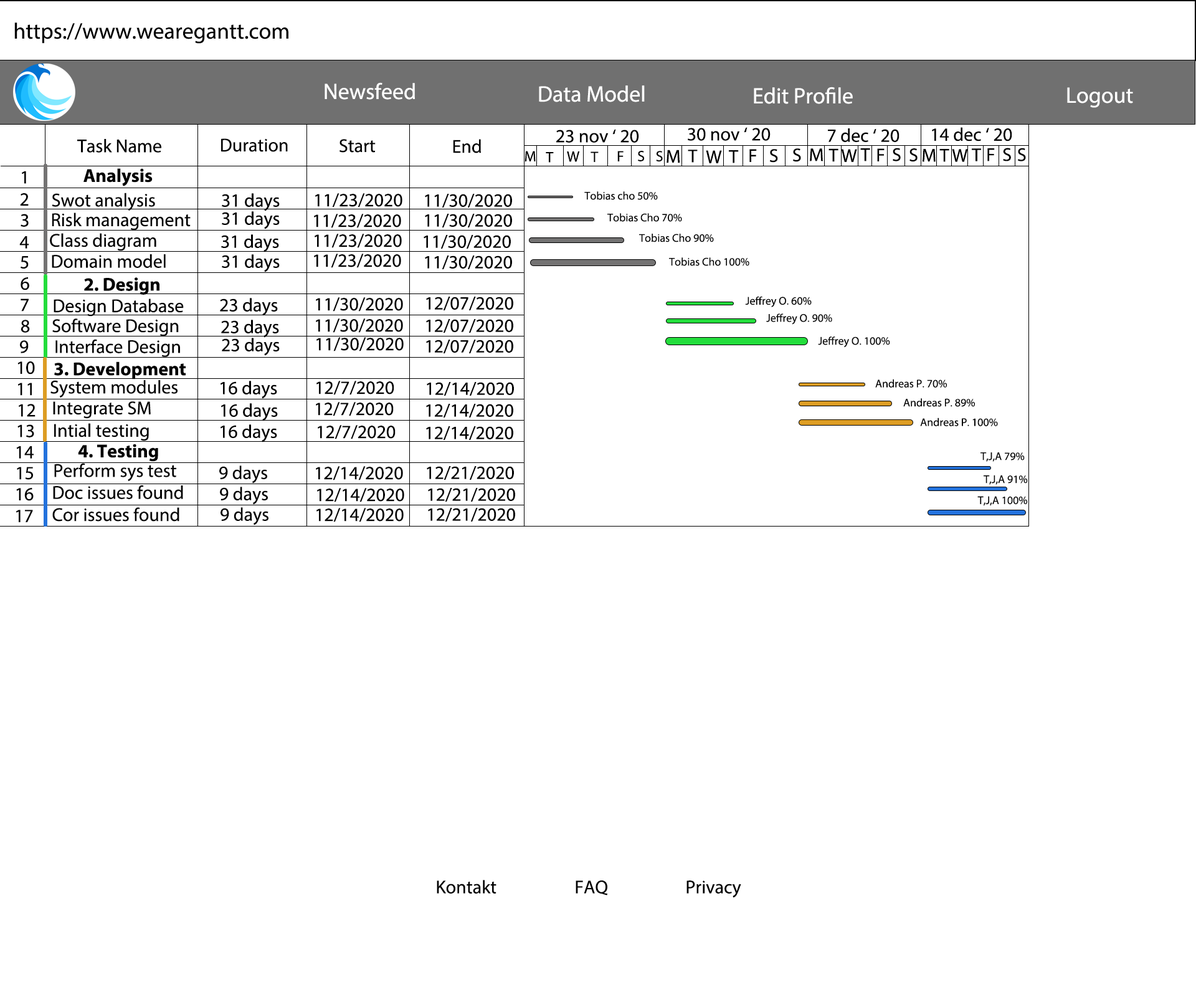
<style>
.page{position:relative;width:1196px;height:997px;background:#ffffff}
.page>*{position:absolute;margin:0}
.t1{font:22.4px "MyriadPro-Regular";color:#000000}
.t2{font:22.4px "MyriadPro-Regular";color:#ffffff}
.t3{font:18.7px "MyriadPro-Regular";color:#000000}
.t4{font:15px "MyriadPro-Regular";color:#000000}
.t5{font:18.7px "MyriadPro-Bold";color:#000000}
.t6{font:11.2px "MyriadPro-Regular";color:#050505}
</style>
<div class="page">
<p class="t1" style="left:14px;top:22px;width:274px;height:22px">https://www.wearegantt.com</p>
<p class="t2" style="left:325px;top:82px;width:90px;height:18px">Newsfeed</p>
<p class="t2" style="left:539px;top:85px;width:106px;height:17px">Data Model</p>
<p class="t2" style="left:754px;top:87px;width:99px;height:17px">Edit Profile</p>
<p class="t2" style="left:1067px;top:87px;width:66px;height:21px">Logout</p>
<p class="t3" style="left:556px;top:129px;width:83px;height:14px">23 nov ‘ 20</p>
<p class="t3" style="left:687px;top:127px;width:84px;height:14px">30 nov ‘ 20</p>
<p class="t3" style="left:828px;top:128px;width:72px;height:14px">7 dec ‘ 20</p>
<p class="t3" style="left:932px;top:127px;width:80px;height:14px">14 dec ‘ 20</p>
<p class="t3" style="left:77px;top:139px;width:84px;height:14px">Task Name</p>
<p class="t3" style="left:221px;top:138px;width:67px;height:14px">Duration</p>
<p class="t3" style="left:340px;top:139px;width:36px;height:14px">Start</p>
<p class="t3" style="left:453px;top:139px;width:28px;height:14px">End</p>
<p class="t3" style="left:667px;top:150px;width:13px;height:13px">M</p>
<p class="t3" style="left:688px;top:150px;width:10px;height:13px">T</p>
<p class="t3" style="left:750px;top:149px;width:7px;height:13px">F</p>
<p class="t3" style="left:770px;top:149px;width:8px;height:14px">S</p>
<p class="t3" style="left:793px;top:148px;width:8px;height:14px">S</p>
<p class="t3" style="left:810px;top:148px;width:13px;height:13px">M</p>
<p class="t3" style="left:829px;top:148px;width:10px;height:14px">T</p>
<p class="t3" style="left:841px;top:149px;width:16px;height:13px">W</p>
<p class="t3" style="left:860px;top:148px;width:10px;height:13px">T</p>
<p class="t3" style="left:877px;top:148px;width:8px;height:13px">F</p>
<p class="t3" style="left:893px;top:148px;width:8px;height:13px">S</p>
<p class="t3" style="left:910px;top:148px;width:8px;height:14px">S</p>
<p class="t3" style="left:923px;top:149px;width:13px;height:13px">M</p>
<p class="t3" style="left:940px;top:149px;width:9px;height:13px">T</p>
<p class="t3" style="left:952px;top:149px;width:16px;height:13px">W</p>
<p class="t3" style="left:972px;top:148px;width:9px;height:13px">T</p>
<p class="t3" style="left:987px;top:148px;width:8px;height:13px">F</p>
<p class="t3" style="left:1003px;top:148px;width:8px;height:13px">S</p>
<p class="t3" style="left:1018px;top:148px;width:8px;height:13px">S</p>
<p class="t4" style="left:525px;top:151px;width:11px;height:10px">M</p>
<p class="t4" style="left:546px;top:152px;width:8px;height:11px">T</p>
<p class="t4" style="left:567px;top:151px;width:13px;height:11px">W</p>
<p class="t4" style="left:591px;top:151px;width:8px;height:11px">T</p>
<p class="t4" style="left:617px;top:151px;width:7px;height:10px">F</p>
<p class="t4" style="left:638px;top:151px;width:7px;height:10px">S</p>
<p class="t4" style="left:656px;top:151px;width:7px;height:11px">S</p>
<p class="t3" style="left:706px;top:150px;width:16px;height:13px">W</p>
<p class="t3" style="left:729px;top:150px;width:10px;height:13px">T</p>
<p class="t3" style="left:22px;top:171px;width:4px;height:13px">1</p>
<p class="t5" style="left:83px;top:168px;width:70px;height:18px">Analysis</p>
<p class="t3" style="left:20px;top:193px;width:9px;height:13px">2</p>
<p class="t3" style="left:52px;top:193px;width:103px;height:18px">Swot analysis</p>
<p class="t3" style="left:222px;top:193px;width:58px;height:18px">31 days</p>
<p class="t3" style="left:315px;top:193px;width:87px;height:14px">11/23/2020</p>
<p class="t3" style="left:425px;top:194px;width:87px;height:13px">11/30/2020</p>
<p class="t6" style="left:584px;top:191px;width:74px;height:9px">Tobias cho 50%</p>
<p class="t3" style="left:21px;top:214px;width:8px;height:13px">3</p>
<p class="t3" style="left:52px;top:212px;width:139px;height:19px">Risk management</p>
<p class="t3" style="left:222px;top:211px;width:58px;height:18px">31 days</p>
<p class="t3" style="left:314px;top:214px;width:87px;height:14px">11/23/2020</p>
<p class="t3" style="left:425px;top:214px;width:87px;height:13px">11/30/2020</p>
<p class="t6" style="left:607px;top:213px;width:75px;height:9px">Tobias Cho 70%</p>
<p class="t3" style="left:50px;top:233px;width:106px;height:18px">Class diagram</p>
<p class="t3" style="left:315px;top:234px;width:87px;height:14px">11/23/2020</p>
<p class="t6" style="left:639px;top:234px;width:75px;height:8px">Tobias Cho 90%</p>
<p class="t3" style="left:19px;top:236px;width:10px;height:13px">4</p>
<p class="t3" style="left:221px;top:234px;width:58px;height:18px">31 days</p>
<p class="t3" style="left:424px;top:235px;width:87px;height:14px">11/30/2020</p>
<p class="t3" style="left:21px;top:256px;width:8px;height:13px">5</p>
<p class="t3" style="left:52px;top:254px;width:114px;height:14px">Domain model</p>
<p class="t3" style="left:222px;top:254px;width:58px;height:18px">31 days</p>
<p class="t3" style="left:314px;top:254px;width:87px;height:14px">11/23/2020</p>
<p class="t3" style="left:425px;top:255px;width:87px;height:14px">11/30/2020</p>
<p class="t6" style="left:669px;top:257px;width:81px;height:9px">Tobias Cho 100%</p>
<p class="t3" style="left:21px;top:277px;width:8px;height:13px">6</p>
<p class="t5" style="left:84px;top:277px;width:75px;height:18px">2. Design</p>
<p class="t3" style="left:21px;top:298px;width:8px;height:14px">7</p>
<p class="t3" style="left:54px;top:298px;width:130px;height:18px">Design Database</p>
<p class="t3" style="left:220px;top:298px;width:58px;height:18px">23 days</p>
<p class="t3" style="left:316px;top:297px;width:87px;height:15px">11/30/2020</p>
<p class="t3" style="left:426px;top:297px;width:87px;height:13px">12/07/2020</p>
<p class="t6" style="left:745px;top:296px;width:67px;height:11px">Jeffrey O. 60%</p>
<p class="t6" style="left:766px;top:313px;width:66px;height:12px">Jeffrey O. 90%</p>
<p class="t3" style="left:21px;top:320px;width:9px;height:13px">8</p>
<p class="t3" style="left:52px;top:318px;width:127px;height:18px">Software Design</p>
<p class="t3" style="left:221px;top:320px;width:58px;height:18px">23 days</p>
<p class="t3" style="left:316px;top:318px;width:87px;height:15px">11/30/2020</p>
<p class="t3" style="left:426px;top:319px;width:87px;height:14px">12/07/2020</p>
<p class="t3" style="left:20px;top:340px;width:9px;height:13px">9</p>
<p class="t3" style="left:55px;top:339px;width:125px;height:18px">Interface Design</p>
<p class="t3" style="left:222px;top:338px;width:58px;height:18px">23 days</p>
<p class="t3" style="left:316px;top:337px;width:88px;height:14px">11/30/2020</p>
<p class="t3" style="left:426px;top:340px;width:87px;height:13px">12/07/2020</p>
<p class="t6" style="left:818px;top:336px;width:72px;height:12px">Jeffrey O. 100%</p>
<p class="t3" style="left:17px;top:361px;width:18px;height:13px">10</p>
<p class="t5" style="left:54px;top:361px;width:132px;height:18px">3. Development</p>
<p class="t3" style="left:17px;top:383px;width:15px;height:13px">11</p>
<p class="t3" style="left:50px;top:380px;width:128px;height:17px">System modules</p>
<p class="t3" style="left:221px;top:381px;width:56px;height:18px">16 days</p>
<p class="t3" style="left:316px;top:381px;width:78px;height:14px">12/7/2020</p>
<p class="t3" style="left:427px;top:382px;width:87px;height:14px">12/14/2020</p>
<p class="t6" style="left:875px;top:379px;width:72px;height:9px">Andreas P. 70%</p>
<p class="t3" style="left:53px;top:401px;width:98px;height:18px">Integrate SM</p>
<p class="t3" style="left:316px;top:402px;width:78px;height:14px">12/7/2020</p>
<p class="t6" style="left:903px;top:398px;width:72px;height:9px">Andreas P. 89%</p>
<p class="t3" style="left:19px;top:404px;width:17px;height:13px">12</p>
<p class="t3" style="left:221px;top:403px;width:57px;height:18px">16 days</p>
<p class="t3" style="left:426px;top:404px;width:87px;height:13px">12/14/2020</p>
<p class="t3" style="left:17px;top:424px;width:17px;height:13px">13</p>
<p class="t3" style="left:54px;top:423px;width:95px;height:18px">Intial testing</p>
<p class="t3" style="left:221px;top:424px;width:56px;height:18px">16 days</p>
<p class="t3" style="left:318px;top:425px;width:78px;height:14px">12/7/2020</p>
<p class="t6" style="left:920px;top:417px;width:78px;height:9px">Andreas P. 100%</p>
<p class="t3" style="left:426px;top:426px;width:87px;height:14px">12/14/2020</p>
<p class="t3" style="left:16px;top:446px;width:18px;height:13px">14</p>
<p class="t5" style="left:78px;top:444px;width:80px;height:18px">4. Testing</p>
<p class="t6" style="left:981px;top:452px;width:44px;height:10px">T,J,A 79%</p>
<p class="t3" style="left:17px;top:467px;width:16px;height:13px">15</p>
<p class="t3" style="left:54px;top:463px;width:122px;height:18px">Perform sys test</p>
<p class="t3" style="left:219px;top:465px;width:48px;height:18px">9 days</p>
<p class="t3" style="left:316px;top:466px;width:87px;height:14px">12/14/2020</p>
<p class="t3" style="left:427px;top:466px;width:87px;height:14px">12/21/2020</p>
<p class="t3" style="left:53px;top:485px;width:130px;height:14px">Doc issues found</p>
<p class="t6" style="left:984px;top:475px;width:44px;height:10px">T,J,A 91%</p>
<p class="t3" style="left:16px;top:488px;width:18px;height:13px">16</p>
<p class="t3" style="left:220px;top:487px;width:48px;height:18px">9 days</p>
<p class="t3" style="left:317px;top:488px;width:87px;height:14px">12/14/2020</p>
<p class="t3" style="left:428px;top:488px;width:87px;height:14px">12/21/2020</p>
<p class="t6" style="left:978px;top:496px;width:50px;height:10px">T,J,A 100%</p>
<p class="t3" style="left:16px;top:510px;width:17px;height:12px">17</p>
<p class="t3" style="left:52px;top:507px;width:127px;height:14px">Cor issues found</p>
<p class="t3" style="left:221px;top:507px;width:48px;height:18px">9 days</p>
<p class="t3" style="left:316px;top:508px;width:88px;height:14px">12/14/2020</p>
<p class="t3" style="left:428px;top:508px;width:87px;height:13px">12/21/2020</p>
<p class="t3" style="left:437px;top:880px;width:60px;height:13px">Kontakt</p>
<p class="t3" style="left:576px;top:880px;width:32px;height:15px">FAQ</p>
<p class="t3" style="left:687px;top:880px;width:54px;height:18px">Privacy</p>
</div>
